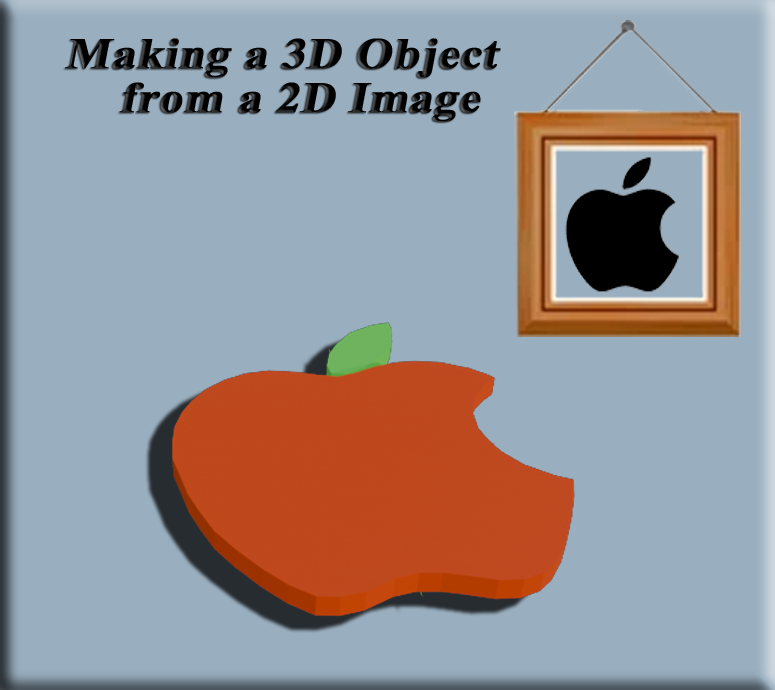
<style>
.page{position:relative;width:775px;height:690px;background:#99aebe}
.page>*{position:absolute;margin:0}
.t1{font:43.7px "TimesNewRomanPS-BoldMT";color:#000000;font-weight:bold;font-style:italic;scale:1.08 1}
</style>
<div class="page">
<p class="t1" style="left:65px;top:38px;width:436px;height:40px">Making a 3D Object</p>
<p class="t1" style="left:119px;top:82px;width:362px;height:40px">from a 2D Image</p>
</div>
